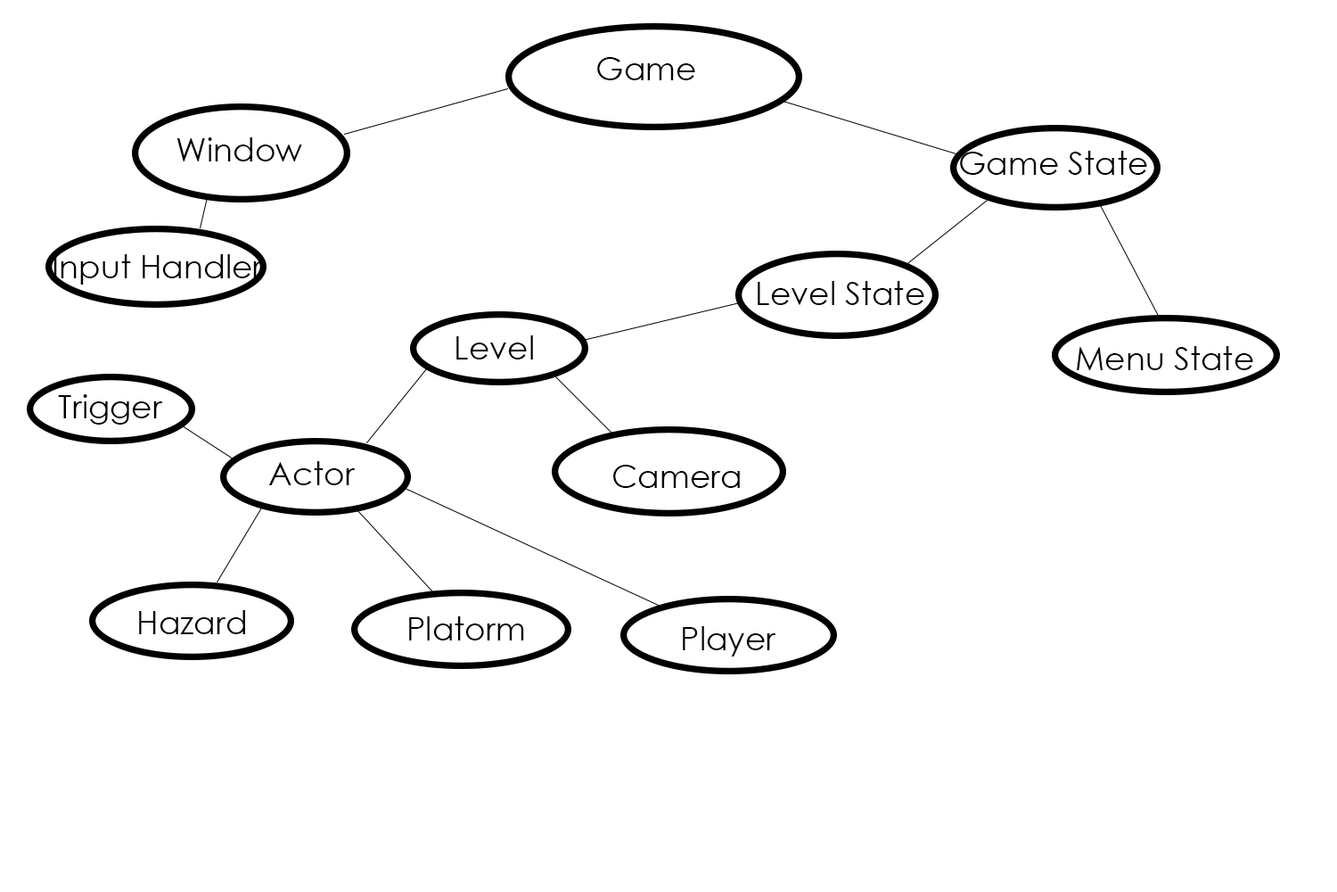
<style>
.page{position:relative;width:1337px;height:892px;background:#ffffff}
.page>*{position:absolute;margin:0}
.t1{font:32.1px "CenturyGothic";color:#000000}
</style>
<div class="page">
<p class="t1" style="left:597px;top:57px;width:98px;height:23px">Game</p>
<p class="t1" style="left:177px;top:137px;width:125px;height:24px">Window</p>
<p class="t1" style="left:960px;top:151px;width:187px;height:24px">Game State</p>
<p class="t1" style="left:53px;top:254px;width:210px;height:30px">Input Handler</p>
<p class="t1" style="left:758px;top:281px;width:167px;height:24px">Level State</p>
<p class="t1" style="left:457px;top:335px;width:76px;height:24px">Level</p>
<p class="t1" style="left:1077px;top:346px;width:177px;height:24px">Menu State</p>
<p class="t1" style="left:58px;top:394px;width:105px;height:30px">Trigger</p>
<p class="t1" style="left:268px;top:461px;width:88px;height:24px">Actor</p>
<p class="t1" style="left:613px;top:465px;width:127px;height:23px">Camera</p>
<p class="t1" style="left:139px;top:610px;width:106px;height:24px">Hazard</p>
<p class="t1" style="left:409px;top:616px;width:115px;height:24px">Platorm</p>
<p class="t1" style="left:683px;top:626px;width:94px;height:30px">Player</p>
</div>
